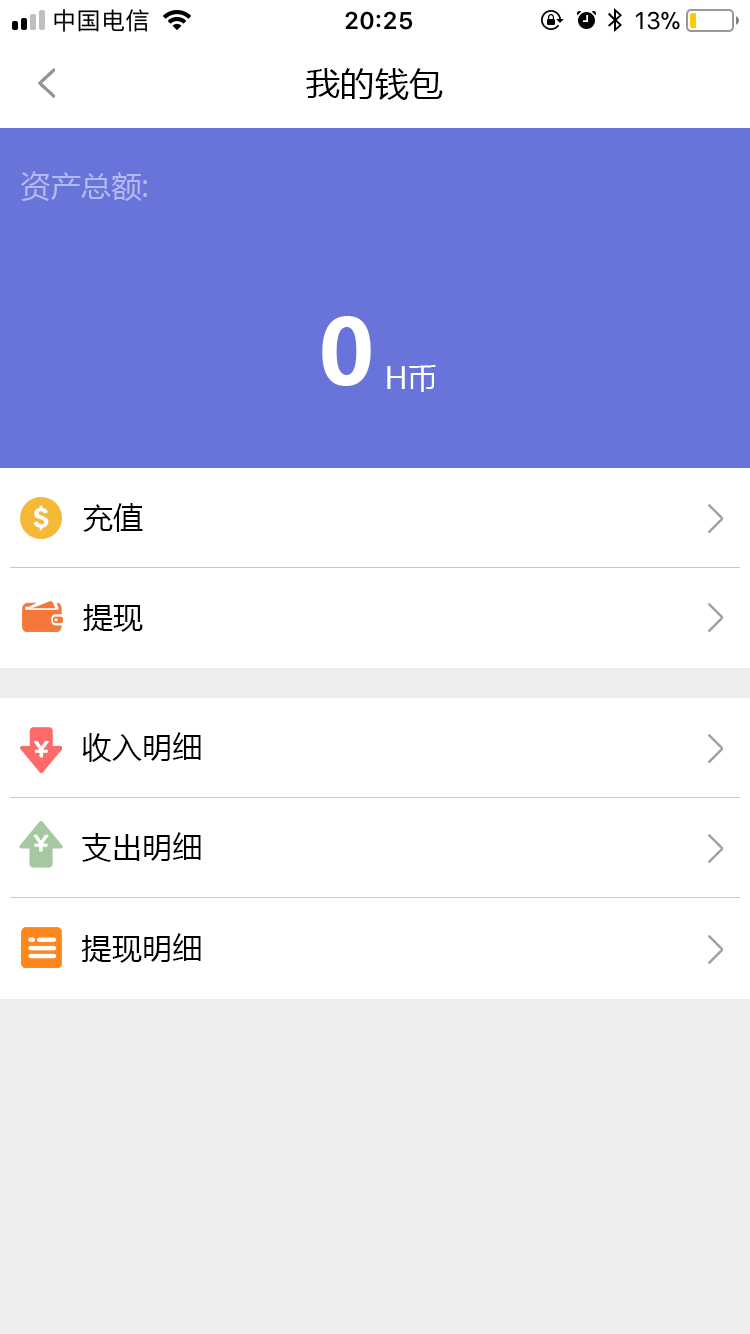
<style>
.page{position:relative;width:750px;height:1334px;background:#ffffff}
.page>*{position:absolute;margin:0}
.t1{font:34px "MicrosoftYaHei";letter-spacing:0.01em;color:#000000}
.t2{font:30px "MicrosoftYaHei";letter-spacing:0.01em;color:#b4baed}
.t3{font:90px "MicrosoftYaHei-Bold";letter-spacing:0.01em;color:#ffffff}
.t4{font:30px "MicrosoftYaHei";color:#ffffff}
.t5{font:30px "MicrosoftYaHei";letter-spacing:0.01em;color:#000000}
</style>
<div class="page">
<p class="t1" style="left:306px;top:68px;width:137px;height:32px">我的钱包</p>
<p class="t2" style="left:21px;top:171px;width:126px;height:30px">资产总额:</p>
<p class="t3" style="left:322px;top:316px;width:49px;height:70px">0</p>
<p class="t4" style="left:387px;top:365px;width:49px;height:27px">H币</p>
<p class="t5" style="left:83px;top:503px;width:60px;height:29px">充值</p>
<p class="t5" style="left:83px;top:604px;width:60px;height:28px">提现</p>
<p class="t5" style="left:82px;top:732px;width:119px;height:30px">收入明细</p>
<p class="t5" style="left:82px;top:832px;width:119px;height:30px">支出明细</p>
<p class="t5" style="left:82px;top:933px;width:119px;height:30px">提现明细</p>
</div>
